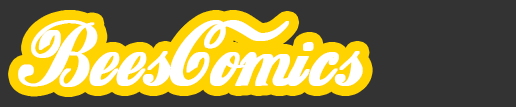
<style>
.page{position:relative;width:516px;height:107px;background:#333333}
.page>*{position:absolute;margin:0}
.t1{font:82.7px "CocaCola";letter-spacing:0.005em;color:#ffffff;font-weight:bold}
</style>
<div class="page">
<p class="t1" style="left:18px;top:20px;width:345px;height:67px">BeesComics</p>
</div>
